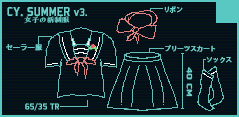
<style>
.page{position:relative;width:239px;height:117px;background:#050f1c}
.page>*{position:absolute;margin:0}
.t1{font:6.5px "AdobeHeitiStd-Regular";color:#6cd1cb}
.t2{font:14.1px "Bombardier";color:#6cd1cb}
.t3{font:14.1px "AdobeHeitiStd-Regular";color:#6cd1cb}
.t4{font:12px "Bombardier";color:#6cd1cb}
.t5{font:6.7px "FZFENGRSTS-EB--GB1-0";color:#6cd1cb;scale:1.13 1}
.t6{font:7.3px "AdobeHeitiStd-Regular";color:#6cd1cb}
.t7{font:8.3px "Bombardier";color:#6cd1cb;scale:1.65 1}
.t8{font:9.2px "Bombardier";color:#6cd1cb;scale:1.08 1}
</style>
<div class="page">
<p class="t1" style="left:164px;top:6px;width:19px;height:7px">リボン</p>
<p class="t2" style="left:7px;top:7px;width:80px;height:10px">CY<span class="t3">. </span>SUMMER <span class="t4">v3.</span></p>
<p class="t5" style="left:24px;top:16px;width:46px;height:8px">女子の新制服</p>
<p class="t6" style="left:6px;top:44px;width:37px;height:7px">セーラー服</p>
<p class="t1" style="left:165px;top:45px;width:51px;height:7px">プリーツスカート</p>
<p class="t1" style="left:206px;top:57px;width:26px;height:6px">ソックス</p>
<p class="t7" style="left:186px;top:67px;width:7px;height:30px;rotate:90deg">40 CM</p>
<p class="t8" style="left:25px;top:103px;width:34px;height:8px">65/35 TR</p>
</div>
